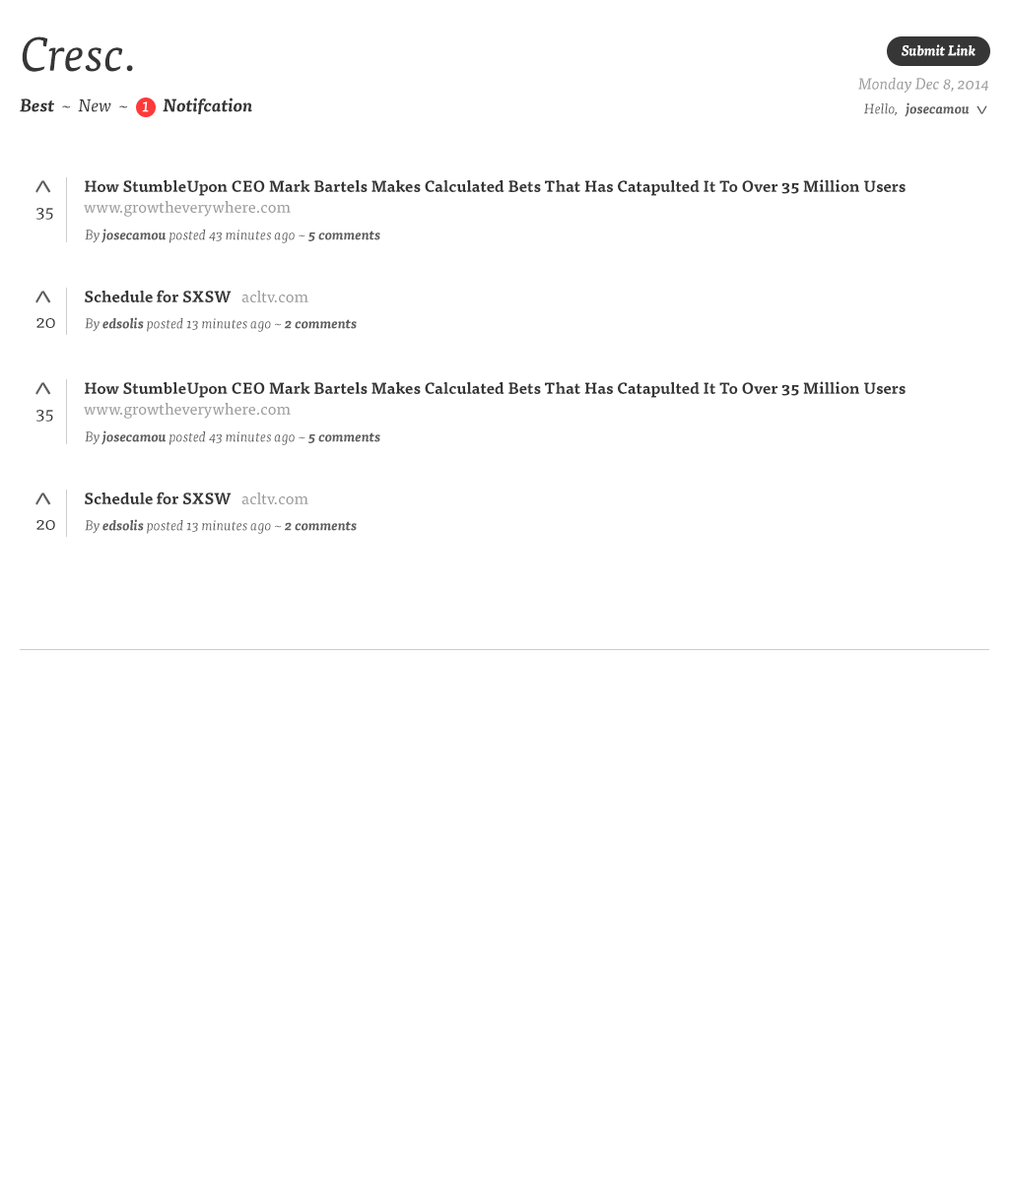
<style>
.page{position:relative;width:1009px;height:1182px;background:#ffffff}
.page>*{position:absolute;margin:0}
.t1{font:47.3px "TisaPro-Ita";color:#363636}
.t2{font:13.8px "TisaPro-BoldIta";color:#ffffff}
.t3{font:15.8px "TisaPro-Ita";color:#9a9a9a}
.t4{font:17.7px "TisaPro-BoldIta";color:#363636}
.t5{font:17.7px "TisaPro-Ita";color:#363636}
.t6{font:17.7px "TisaPro-Ita";color:#ffffff}
.t7{font:13.8px "TisaPro-BoldIta";color:#5e5e5e}
.t8{font:13.8px "TisaPro-Ita";color:#5e5e5e}
.t9{font:23.6px "TisaPro-Ita";color:#5e5e5e}
.t10{font:35.5px "TisaPro";color:#5e5e5e}
.t11{font:15.8px/20.7px "TisaPro-Bold";color:#363636}
.t12{font:15.8px/20.7px "TisaPro";color:#9a9a9a}
.t13{font:17.7px "TisaPro";color:#363636}
.t14{font:15.8px "TisaPro-Bold";color:#363636}
.t15{font:15.8px "TisaPro";color:#9a9a9a}
</style>
<div class="page">
<p class="t1" style="left:22px;top:36px;width:111px;height:36px">Cresc.</p>
<p class="t2" style="left:901px;top:44px;width:74px;height:12px">Submit Link</p>
<p class="t3" style="left:858px;top:77px;width:130px;height:17px">Monday Dec 8, 2014</p>
<p class="t4" style="left:20px;top:98px;width:232px;height:16px">Best<span class="t5">  ~  New  ~ </span><span class="t6">   1    </span>Notifcation</p>
<p class="t7" style="left:864px;top:102px;width:105px;height:15px"><span class="t8">Hello,</span>   josecamou</p>
<p class="t9" style="left:976px;top:105px;width:11px;height:9px;rotate:180deg">^</p>
<p class="t10" style="left:35px;top:180px;width:16px;height:13px">^</p>
<p class="t11" style="left:84px;top:179px;width:821px;height:38px">How StumbleUpon CEO Mark Bartels Makes Calculated Bets That Has Catapulted It To Over 35 Million Users    <span class="t12">www.growtheverywhere.com</span></p>
<p class="t13" style="left:36px;top:208px;width:17px;height:12px">35</p>
<p class="t8" style="left:85px;top:229px;width:295px;height:14px">By <span class="t7">josecamou</span> posted 43 minutes ago ~ <span class="t7">5 comments</span></p>
<p class="t10" style="left:35px;top:291px;width:16px;height:12px">^</p>
<p class="t14" style="left:85px;top:290px;width:223px;height:12px">Schedule for SXSW   <span class="t15">acltv.com</span></p>
<p class="t8" style="left:85px;top:317px;width:272px;height:15px">By <span class="t7">edsolis</span> posted 13 minutes ago ~ <span class="t7">2 comments</span></p>
<p class="t13" style="left:36px;top:318px;width:19px;height:10px">20</p>
<p class="t10" style="left:35px;top:382px;width:16px;height:13px">^</p>
<p class="t11" style="left:84px;top:381px;width:821px;height:38px">How StumbleUpon CEO Mark Bartels Makes Calculated Bets That Has Catapulted It To Over 35 Million Users    <span class="t12">www.growtheverywhere.com</span></p>
<p class="t13" style="left:36px;top:410px;width:17px;height:12px">35</p>
<p class="t8" style="left:85px;top:430px;width:295px;height:15px">By <span class="t7">josecamou</span> posted 43 minutes ago ~ <span class="t7">5 comments</span></p>
<p class="t10" style="left:35px;top:493px;width:16px;height:12px">^</p>
<p class="t14" style="left:85px;top:492px;width:223px;height:12px">Schedule for SXSW   <span class="t15">acltv.com</span></p>
<p class="t13" style="left:36px;top:520px;width:19px;height:10px">20</p>
<p class="t8" style="left:85px;top:519px;width:272px;height:15px">By <span class="t7">edsolis</span> posted 13 minutes ago ~ <span class="t7">2 comments</span></p>
</div>
